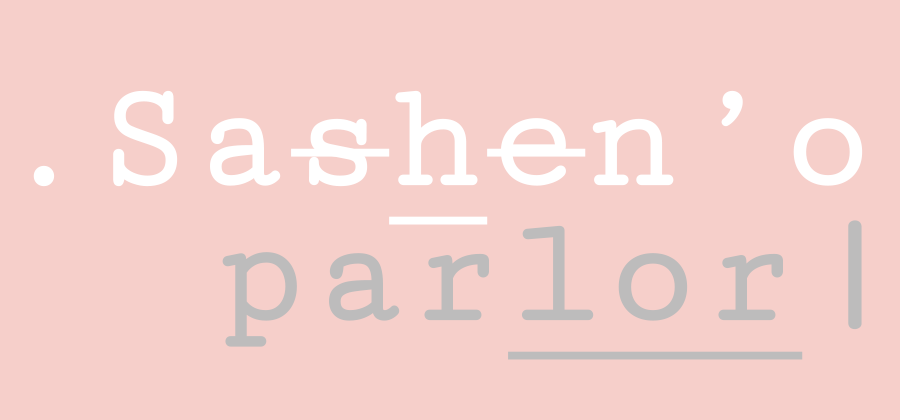
<style>
.page{position:relative;width:900px;height:420px;background:#f6cfca}
.page>*{position:absolute;margin:0}
.t1{font:155px "CutiveMono-Regular";color:#ffffff;font-weight:bold}
.t2{font:155px "CutiveMono-Regular";color:#ffffff;font-weight:bold;text-decoration:underline}
.t3{font:155px "CutiveMono-Regular";color:#bdbcbc;font-weight:bold}
.t4{font:155px "CutiveMono-Regular";color:#bdbcbc;font-weight:bold;text-decoration:underline}
</style>
<div class="page">
<p class="t1" style="left:33px;top:90px;width:830px;height:135px">.Sas<span class="t2">h</span>en’o</p>
<p class="t3" style="left:222px;top:220px;width:640px;height:140px">par<span class="t4">lor</span>|</p>
</div>
